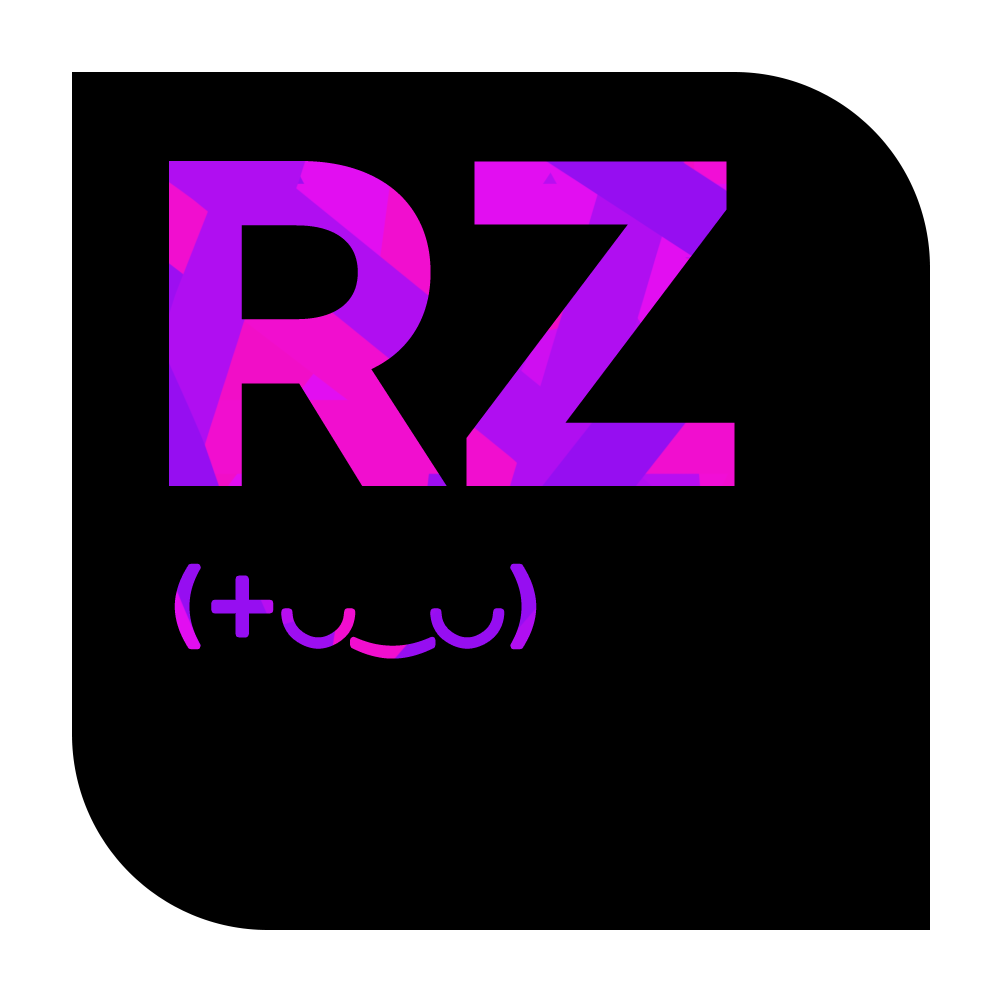
<style>
.page{position:relative;width:1000px;height:1000px;background:#000000}
.page>*{position:absolute;margin:0}
.t1{font:398.4px "GmarketSansTTFBold"}
.t2{font:88.9px "DejaVuSans"}
</style>
<div class="page">
<p class="t1" style="left:169px;top:161px;width:566px;height:325px">RZ</p>
<p class="t2" style="left:177px;top:566px;width:357px;height:90px">(+◡‿◡)</p>
</div>
